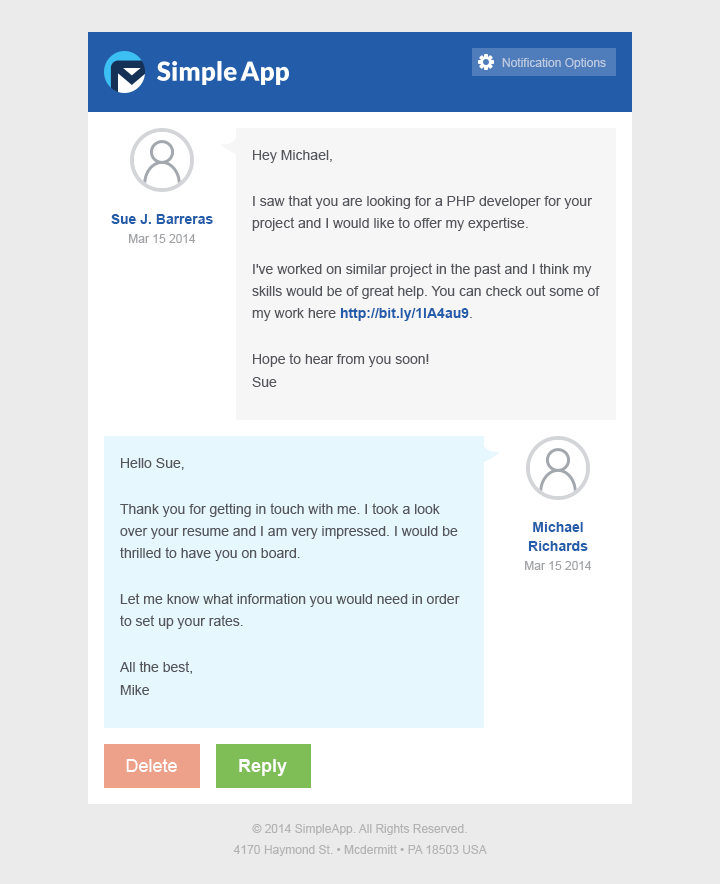
<style>
.page{position:relative;width:720px;height:884px;background:#ebebeb}
.page>*{position:absolute;margin:0}
.t1{font:12px "ArialMT";color:#bcc8df}
.t2{font:14px/22px "ArialMT";color:#54565c}
.t3{font:14px/22px "Arial-BoldMT";color:#235daa}
.t4{font:14px/19px "Arial-BoldMT";color:#235daa}
.t5{font:12px/19px "ArialMT";color:#a1a2a5}
.t6{font:18px "ArialMT";color:#ffffff}
.t7{font:18px "Arial-BoldMT";color:#ffffff}
.t8{font:12px/21px "ArialMT";color:#b3b3b3}
</style>
<div class="page">
<p class="t1" style="left:502px;top:58px;width:104px;height:11px">Notification Options</p>
<p class="t2" style="left:252px;top:150px;width:348px;height:237px">Hey Michael, <br><br>I saw that you are looking for a PHP developer for your project and I would like to offer my expertise. <br><br>I've worked on similar project in the past and I think my skills would be of great help. You can check out some of my work here <span class="t3">http://bit.ly/1lA4au9</span>.<br><br>Hope to hear from you soon!<br>Sue</p>
<p class="t4" style="left:111px;top:214px;width:102px;height:29px;text-align:center">Sue J. Barreras<br><span class="t5">Mar 15 2014</span></p>
<p class="t2" style="left:120px;top:458px;width:340px;height:237px">Hello Sue, <br><br>Thank you for getting in touch with me. I took a look over your resume and I am very impressed. I would be thrilled to have you on board. <br><br>Let me know what information you would need in order to set up your rates.<br><br>All the best,<br>Mike</p>
<p class="t4" style="left:525px;top:522px;width:67px;height:48px;text-align:center">Michael  Richards<br><span class="t5">Mar 15 2014</span></p>
<p class="t6" style="left:126px;top:759px;width:51px;height:13px">Delete</p>
<p class="t7" style="left:239px;top:759px;width:48px;height:17px">Reply</p>
<p class="t8" style="left:233px;top:824px;width:254px;height:32px;text-align:center">© 2014 SimpleApp. All Rights Reserved.<br>4170 Haymond St. • Mcdermitt • PA 18503 USA</p>
</div>
